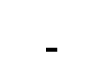
<style>
.page{position:relative;width:105px;height:83px;background:#ffffff}
.page>*{position:absolute;margin:0}
.t1{font:47.9px "DroidSans";color:#000000}
</style>
<div class="page">
<p class="t1" style="left:46px;top:47px;width:12px;height:5px">-</p>
</div>
